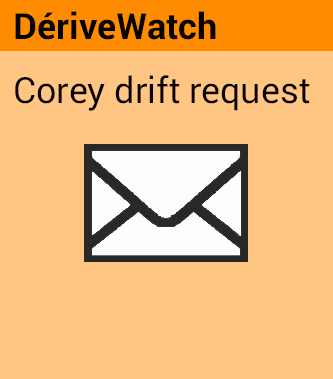
<style>
.page{position:relative;width:333px;height:379px;background:#ffc683}
.page>*{position:absolute;margin:0}
.t1{font:36px "Roboto-Bold";color:#050300}
.t2{font:36px "Roboto-Black";color:#050300}
</style>
<div class="page">
<p class="t1" style="left:15px;top:11px;width:201px;height:29px">DériveWatch</p>
<p class="t2" style="left:15px;top:75px;width:295px;height:36px">Corey drift request</p>
</div>
